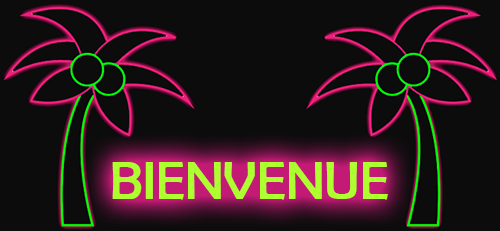
<style>
.page{position:relative;width:500px;height:231px;background:#0c0c0c}
.page>*{position:absolute;margin:0}
.t1{font:53.9px "BerlinSansFB-Reg";color:#adff2f}
</style>
<div class="page">
<p class="t1" style="left:112px;top:162px;width:276px;height:38px">BIENVENUE</p>
</div>
